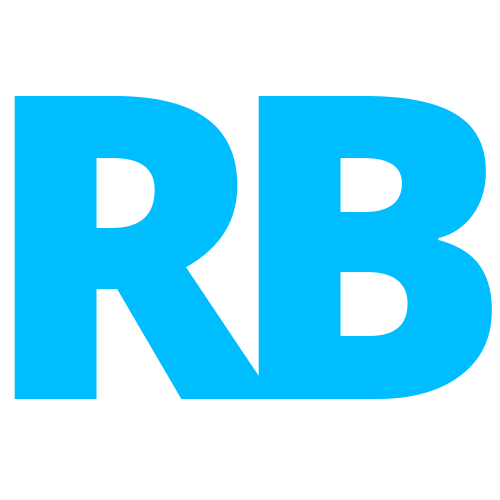
<style>
.page{position:relative;width:500px;height:500px;background:#ffffff}
.page>*{position:absolute;margin:0}
.t1{font:423.9px "OpenSans-Extrabold";letter-spacing:-0.1em;color:#00bdff}
</style>
<div class="page">
<p class="t1" style="left:14px;top:96px;width:478px;height:303px">RB</p>
</div>
